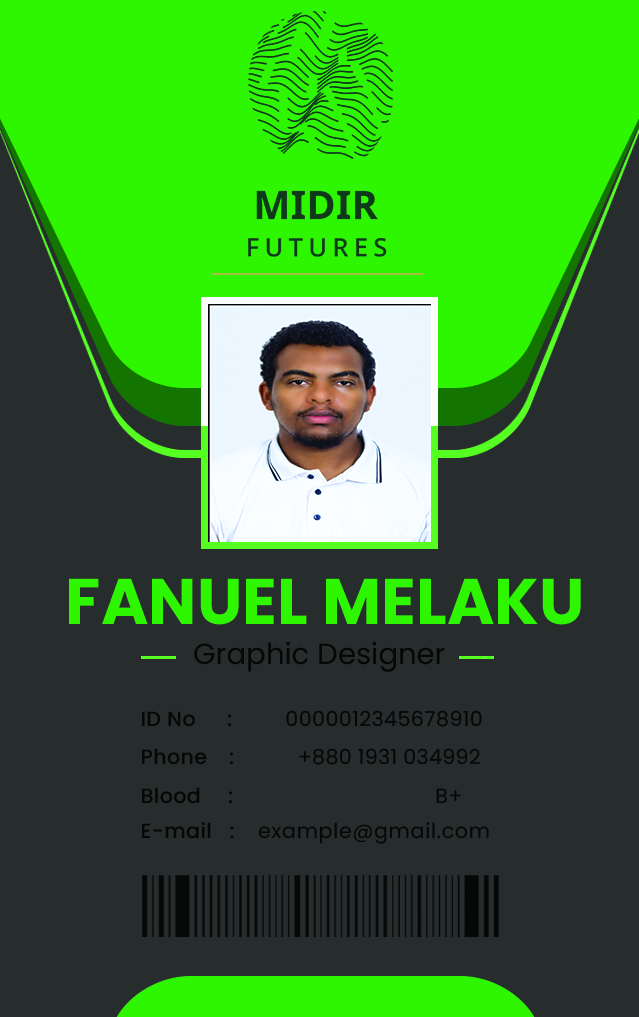
<style>
.page{position:relative;width:639px;height:1017px;background:#272d2c}
.page>*{position:absolute;margin:0}
.t1{font:64.5px "Poppins-Bold";color:#2ef500;text-transform:uppercase}
.t2{font:29.1px "Poppins-Regular";color:#060808}
.t3{font:20.6px "Poppins-Regular";letter-spacing:0.02em;color:#060808}
.t4{font:20.6px "Poppins-Medium";letter-spacing:0.02em;color:#060808}
.t5{font:20.6px "Poppins-Medium";letter-spacing:0.07em;color:#060808}
.t6{font:20.6px "Poppins-Regular";letter-spacing:0.015em;color:#060808}
.t7{font:20.6px "Poppins-Medium";letter-spacing:0.002em;color:#060808}
.t8{font:20.6px "Poppins-Medium";color:#060808}
.t9{font:20.6px "Poppins-Regular";letter-spacing:0.033em;color:#060808}
</style>
<div class="page">
<p class="t1" style="left:69px;top:578px;width:512px;height:47px">Fanuel melaku</p>
<p class="t2" style="left:194px;top:641px;width:251px;height:31px">Graphic Designer</p>
<p class="t3" style="left:142px;top:710px;width:340px;height:17px"><span class="t4">ID No   </span><span class="t5">  :         </span>0000012345678910</p>
<p class="t6" style="left:142px;top:748px;width:338px;height:17px"><span class="t4">Phone</span><span class="t7">    :           </span>+880 1931 034992</p>
<p class="t4" style="left:142px;top:787px;width:319px;height:17px">Blood<span class="t8">     :                                   </span><span class="t3">B+</span></p>
<p class="t9" style="left:142px;top:822px;width:347px;height:22px"><span class="t4">E-mail   :    </span>example@gmail.com</p>
</div>
